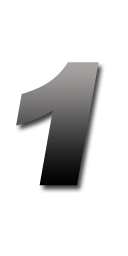
<style>
.page{position:relative;width:128px;height:256px;background:#ffffff}
.page>*{position:absolute;margin:0}
.t1{font:162.7px "Arial-Black";font-weight:bold;font-style:italic}
</style>
<div class="page">
<p class="t1" style="left:16px;top:62px;width:83px;height:124px">1</p>
</div>
